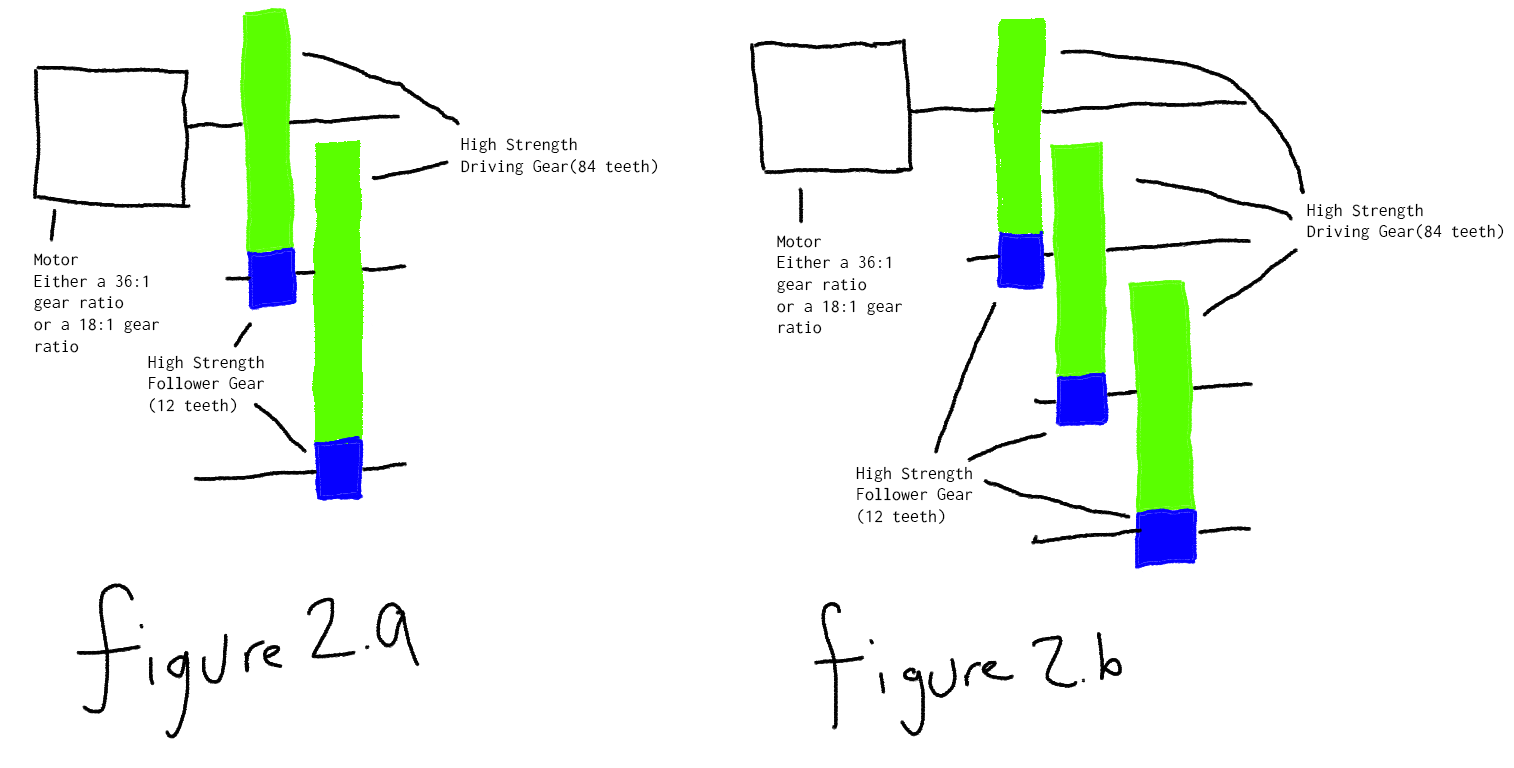
<style>
.page{position:relative;width:1514px;height:768px;background:#ffffff}
.page>*{position:absolute;margin:0}
.t1{font:18px "Inconsolata-Regular";color:#000000}
</style>
<div class="page">
<p class="t1" style="left:461px;top:137px;width:197px;height:38px">High Strength <br>Driving Gear(84 teeth)</p>
<p class="t1" style="left:1307px;top:203px;width:197px;height:37px">High Strength <br>Driving Gear(84 teeth)</p>
<p class="t1" style="left:777px;top:235px;width:125px;height:99px">Motor<br>Either a 36:1 <br>gear ratio<br>or a 18:1 gear <br>ratio</p>
<p class="t1" style="left:34px;top:253px;width:125px;height:100px">Motor<br>Either a 36:1 <br>gear ratio<br>or a 18:1 gear <br>ratio</p>
<p class="t1" style="left:148px;top:355px;width:116px;height:58px">High Strength<br>Follower Gear<br>(12 teeth)</p>
<p class="t1" style="left:856px;top:466px;width:117px;height:58px">High Strength<br>Follower Gear<br>(12 teeth)</p>
</div>
